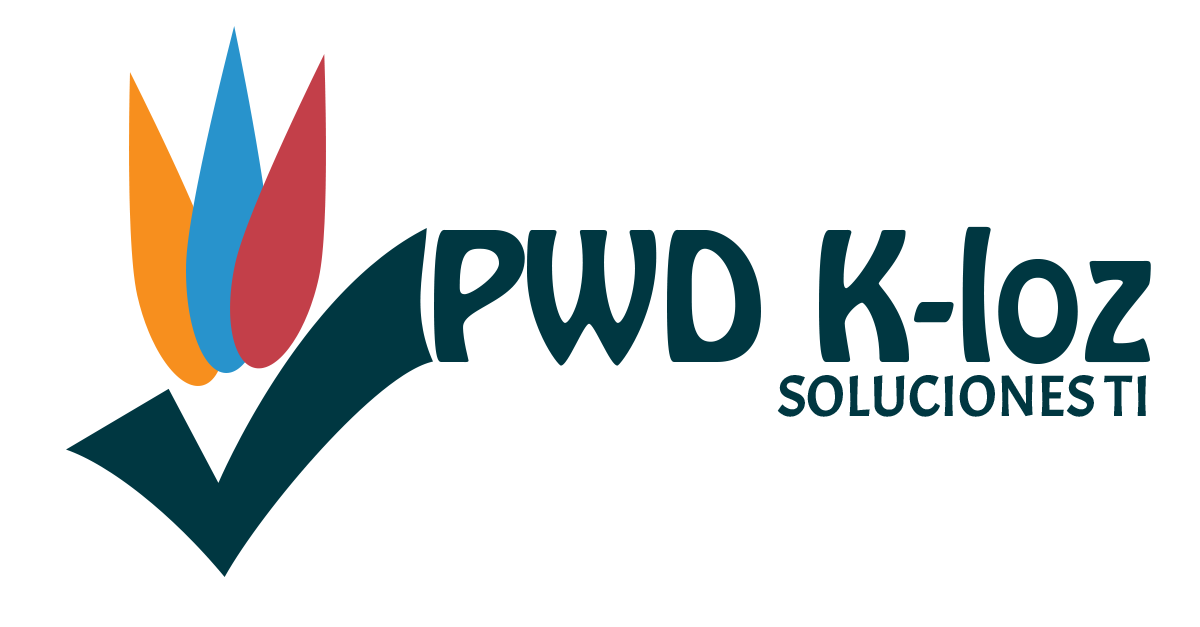
<style>
.page{position:relative;width:1200px;height:627px;background:#ffffff}
.page>*{position:absolute;margin:0}
.t1{font:158.3px "HoboStd";color:#003741}
.t2{font:58.5px "Acme-Regular";color:#003741}
</style>
<div class="page">
<p class="t1" style="left:434px;top:226px;width:717px;height:140px">PWD K-loz</p>
<p class="t2" style="left:777px;top:375px;width:369px;height:42px">SOLUCIONES TI</p>
</div>
